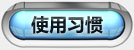
<style>
.page{position:relative;width:134px;height:50px}
.page>*{position:absolute;margin:0}
.t1{font:18px "MicrosoftYaHei";color:#0a171d}
</style>
<div class="page">
<p class="t1" style="left:31px;top:16px;width:72px;height:18px">使用习惯</p>
</div>
